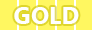
<style>
.page{position:relative;width:92px;height:30px;background:#fff760}
.page>*{position:absolute;margin:0}
.t1{font:24px "SegoeUI-Bold";color:#ffffff}
</style>
<div class="page">
<p class="t1" style="left:14px;top:7px;width:65px;height:17px">GOLD</p>
</div>
